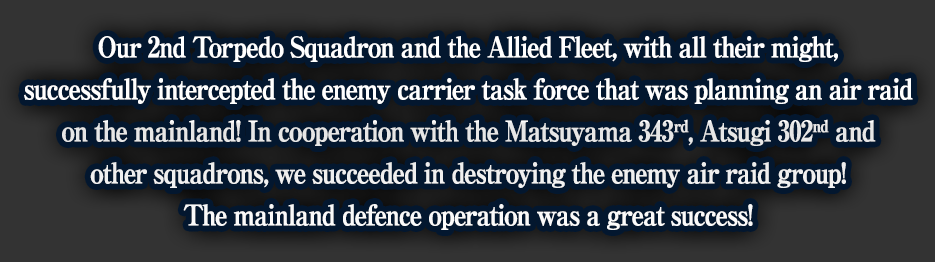
<style>
.page{position:relative;width:935px;height:262px;background:#03172f}
.page>*{position:absolute;margin:0}
.t1{font:28px/42px "RyuminPro-ExBold";letter-spacing:-0.08em;color:#ffffff;font-weight:bold;scale:0.9 1}
</style>
<div class="page">
<p class="t1" style="left:24px;top:36px;width:889px;height:194px;text-align:center">Our 2nd Torpedo Squadron and the Allied Fleet, with all their might,<br>successfully intercepted the enemy carrier task force that was planning an air raid<br>on the mainland! In cooperation with the Matsuyama 343rd, Atsugi 302nd and<br>other squadrons, we succeeded in destroying the enemy air raid group!<br>The mainland defence operation was a great success!</p>
</div>
